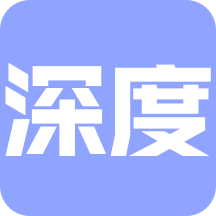
<style>
.page{position:relative;width:216px;height:216px;background:#8fa4ff}
.page>*{position:absolute;margin:0}
.t1{font:106.9px "BigruixianBlackGBV1.0";color:#ffffff}
</style>
<div class="page">
<p class="t1" style="left:5px;top:62px;width:206px;height:94px">深度</p>
</div>
